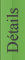
<style>
.page{position:relative;width:25px;height:60px}
.page>*{position:absolute;margin:0}
.t1{font:16px "TimesNewRomanPSMT";color:#404040}
</style>
<div class="page">
<p class="t1" style="left:6px;top:8px;width:13px;height:45px;rotate:-90deg">Détails</p>
</div>
